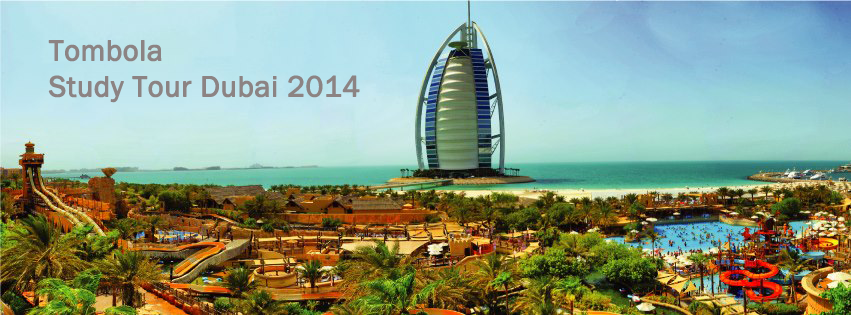
<style>
.page{position:relative;width:851px;height:315px}
.page>*{position:absolute;margin:0}
.t1{font:30px "FranklinGothic-Book";color:#8c8383;font-weight:bold}
</style>
<div class="page">
<p class="t1" style="left:48px;top:40px;width:312px;height:63px">Tombola <br>Study Tour Dubai 2014</p>
</div>
